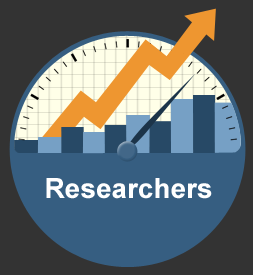
<style>
.page{position:relative;width:253px;height:275px;background:#333333}
.page>*{position:absolute;margin:0}
.t1{font:28px "Arial-BoldMT";color:#ffffff}
</style>
<div class="page">
<p class="t1" style="left:46px;top:178px;width:166px;height:21px">Researchers</p>
</div>
